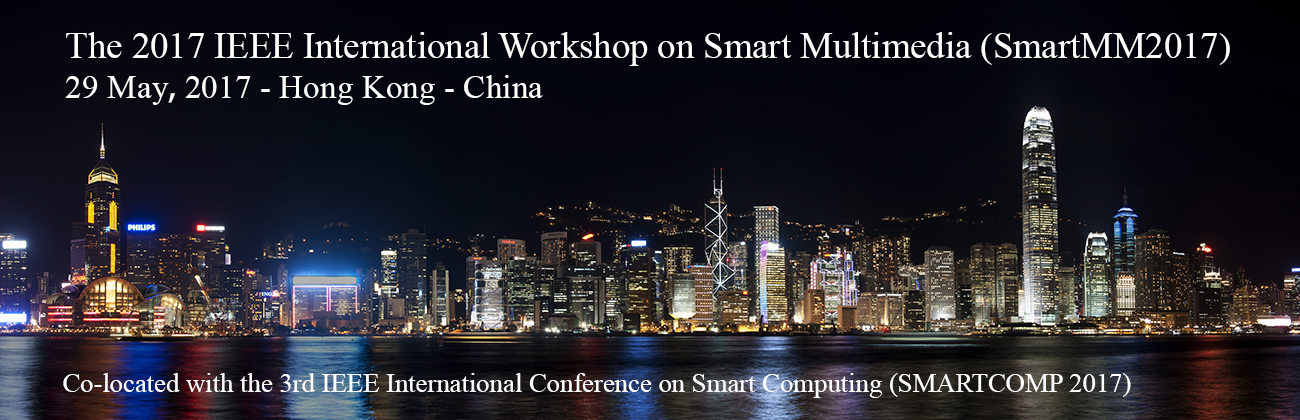
<style>
.page{position:relative;width:1300px;height:420px}
.page>*{position:absolute;margin:0}
.t1{font:36.7px "TimesNewRomanPSMT";color:#ffffff}
.t2{font:33.3px "TimesNewRomanPSMT";color:#ffffff}
.t3{font:33.3px "AdobeHeitiStd-Regular";color:#ffffff}
.t4{font:26.7px "TimesNewRomanPSMT";color:#ffffff}
</style>
<div class="page">
<p class="t1" style="left:65px;top:32px;width:1165px;height:73px">The 2017 IEEE International Workshop on Smart Multimedia (SmartMM2017)<br><span class="t2">29 May</span><span class="t3">,</span><span class="t2"> 2017 - Hong Kong - China</span></p>
<p class="t4" style="left:63px;top:373px;width:1068px;height:25px">Co-located with the 3rd IEEE International Conference on Smart Computing (SMARTCOMP 2017)</p>
</div>
